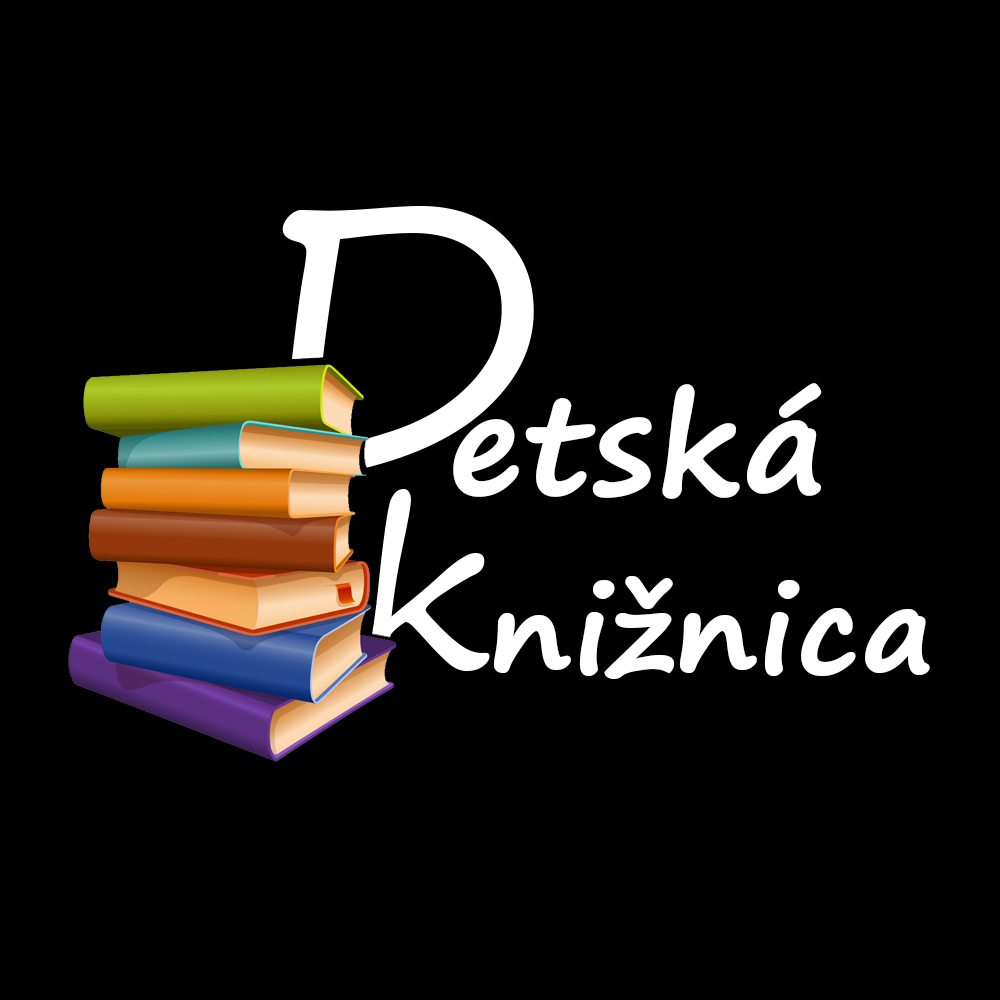
<style>
.page{position:relative;width:1000px;height:1000px;background:#000000}
.page>*{position:absolute;margin:0}
.t1{font:132.6px "SegoePrint-Bold";color:#ffffff;font-weight:bold;scale:1.05 1}
.t2{font:115.4px "SegoePrint-Bold";color:#ffffff;font-weight:bold;scale:1.05 1}
</style>
<div class="page">
<p class="t1" style="left:453px;top:383px;width:369px;height:116px">etská</p>
<p class="t2" style="left:493px;top:576px;width:437px;height:103px">nižnica</p>
</div>
